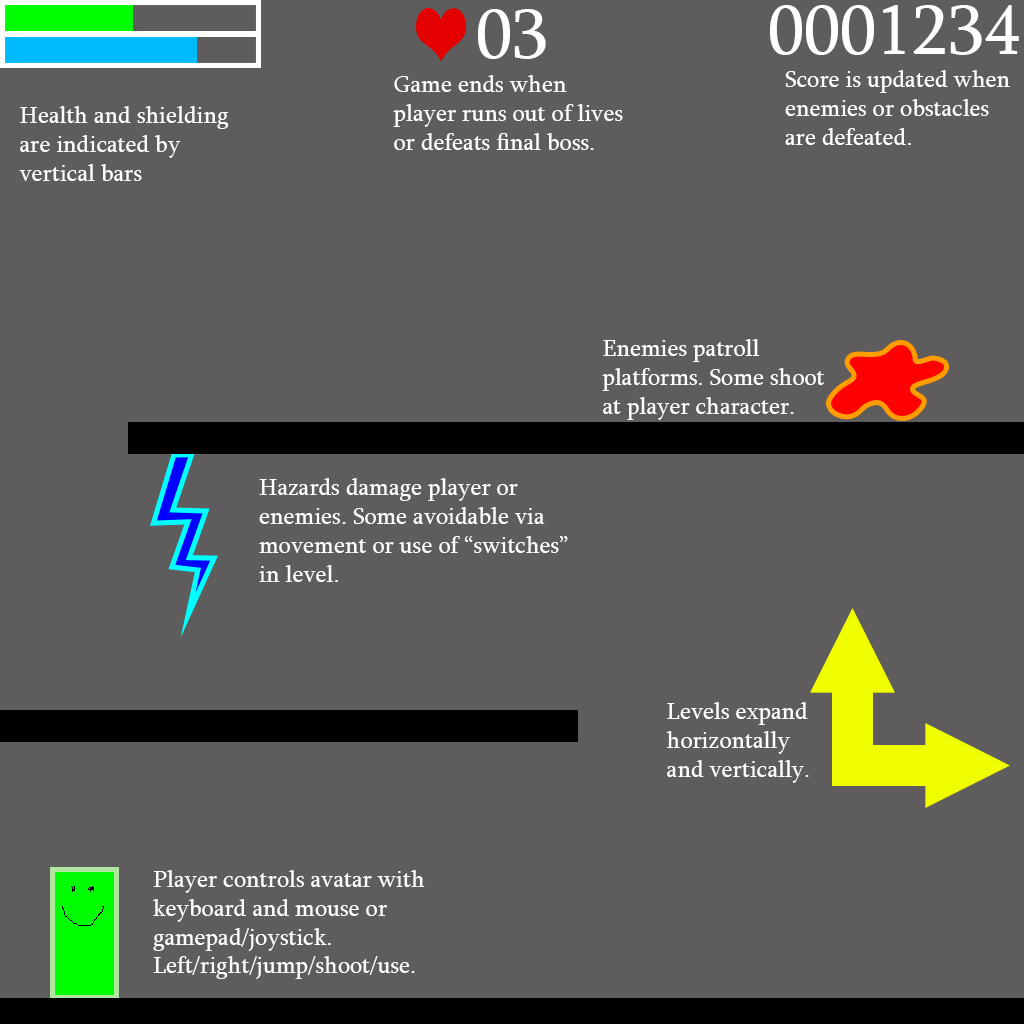
<style>
.page{position:relative;width:1024px;height:1024px;background:#5e5c5c}
.page>*{position:absolute;margin:0}
.t1{font:72px "Sylfaen";color:#ffffff}
.t2{font:24px "Sylfaen";color:#ffffff}
</style>
<div class="page">
<p class="t1" style="left:770px;top:5px;width:249px;height:50px">0001234</p>
<p class="t1" style="left:478px;top:9px;width:68px;height:50px">03</p>
<p class="t2" style="left:393px;top:75px;width:230px;height:75px">Game ends when player runs out of lives or defeats final boss.</p>
<p class="t2" style="left:785px;top:70px;width:225px;height:75px">Score is updated when enemies or obstacles are defeated.</p>
<p class="t2" style="left:19px;top:106px;width:210px;height:75px">Health and shielding are indicated by vertical bars</p>
<p class="t2" style="left:602px;top:339px;width:222px;height:81px">Enemies patroll platforms. Some shoot at player character.</p>
<p class="t2" style="left:259px;top:478px;width:309px;height:104px">Hazards damage player or enemies. Some avoidable via movement or use of “switches” in level.</p>
<p class="t2" style="left:666px;top:702px;width:143px;height:81px">Levels expand horizontally and vertically.</p>
<p class="t2" style="left:153px;top:870px;width:272px;height:109px">Player controls avatar with keyboard and mouse or gamepad/joystick. Left/right/jump/shoot/use.</p>
</div>
